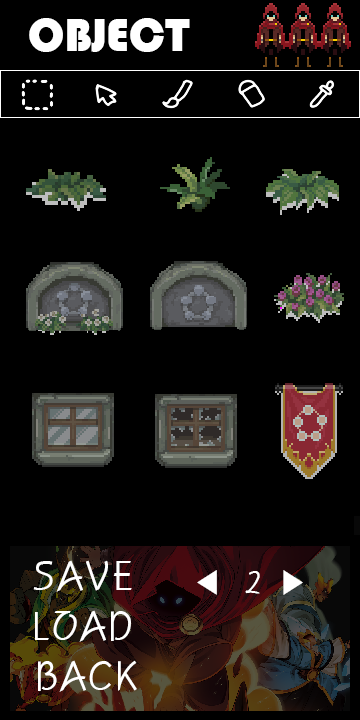
<style>
.page{position:relative;width:360px;height:720px;background:#000000}
.page>*{position:absolute;margin:0}
.t1{font:48px "Bauhaus93";color:#ffffff}
.t2{font:40px "H2porL";color:#ffffff}
.t3{font:32px "Gulim";color:#ffffff}
.t4{font:32px "PyunjiR-HM";color:#ffffff}
</style>
<div class="page">
<p class="t1" style="left:29px;top:18px;width:161px;height:34px">OBJECT</p>
<p class="t2" style="left:33px;top:560px;width:99px;height:32px">SAVE</p>
<p class="t3" style="left:197px;top:570px;width:106px;height:25px">◀     ▶</p>
<p class="t4" style="left:245px;top:571px;width:15px;height:23px">2</p>
<p class="t2" style="left:35px;top:610px;width:96px;height:32px">LOAD</p>
<p class="t2" style="left:38px;top:660px;width:99px;height:32px">BACK</p>
</div>
